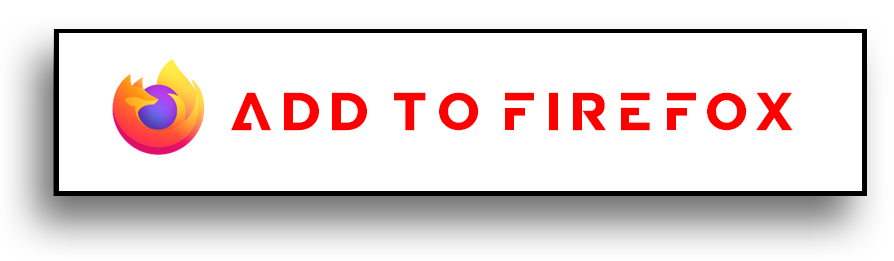
<style>
.page{position:relative;width:894px;height:261px;background:#ffffff}
.page>*{position:absolute;margin:0}
.t1{font:53px "BabaPro-Bold";color:#ff0000}
</style>
<div class="page">
<p class="t1" style="left:231px;top:92px;width:562px;height:39px">Add to FIREFOX</p>
</div>
